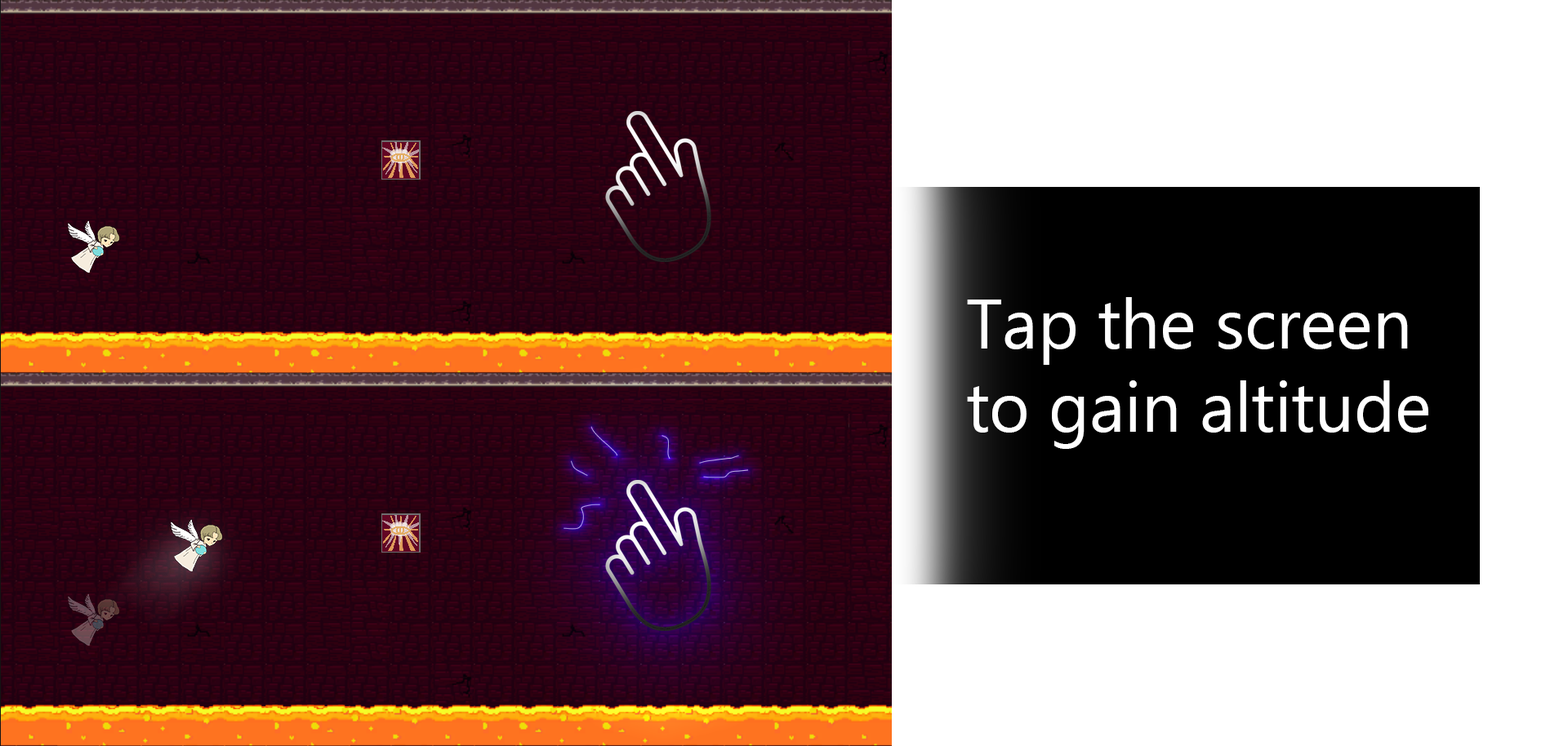
<style>
.page{position:relative;width:1568px;height:746px;background:#ffffff}
.page>*{position:absolute;margin:0}
.t1{font:69.1px "Ebrima";color:#ffffff}
</style>
<div class="page">
<p class="t1" style="left:967px;top:297px;width:461px;height:152px;text-align:center">Tap the screen<br> to gain altitude</p>
</div>
